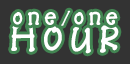
<style>
.page{position:relative;width:130px;height:64px;background:#333333}
.page>*{position:absolute;margin:0}
.t1{font:24px "BaaBookHmkBold";letter-spacing:0.2em;color:#ffffff}
.t2{font:18px "BaaBookHmkBold";letter-spacing:0.2em;color:#ffffff}
.t3{font:36px "BaaBookHmkBold";letter-spacing:0.2em;color:#ffffff}
</style>
<div class="page">
<p class="t1" style="left:13px;top:10px;width:105px;height:16px">one<span class="t2">/</span>one</p>
<p class="t3" style="left:11px;top:23px;width:108px;height:31px">HOUR</p>
</div>
